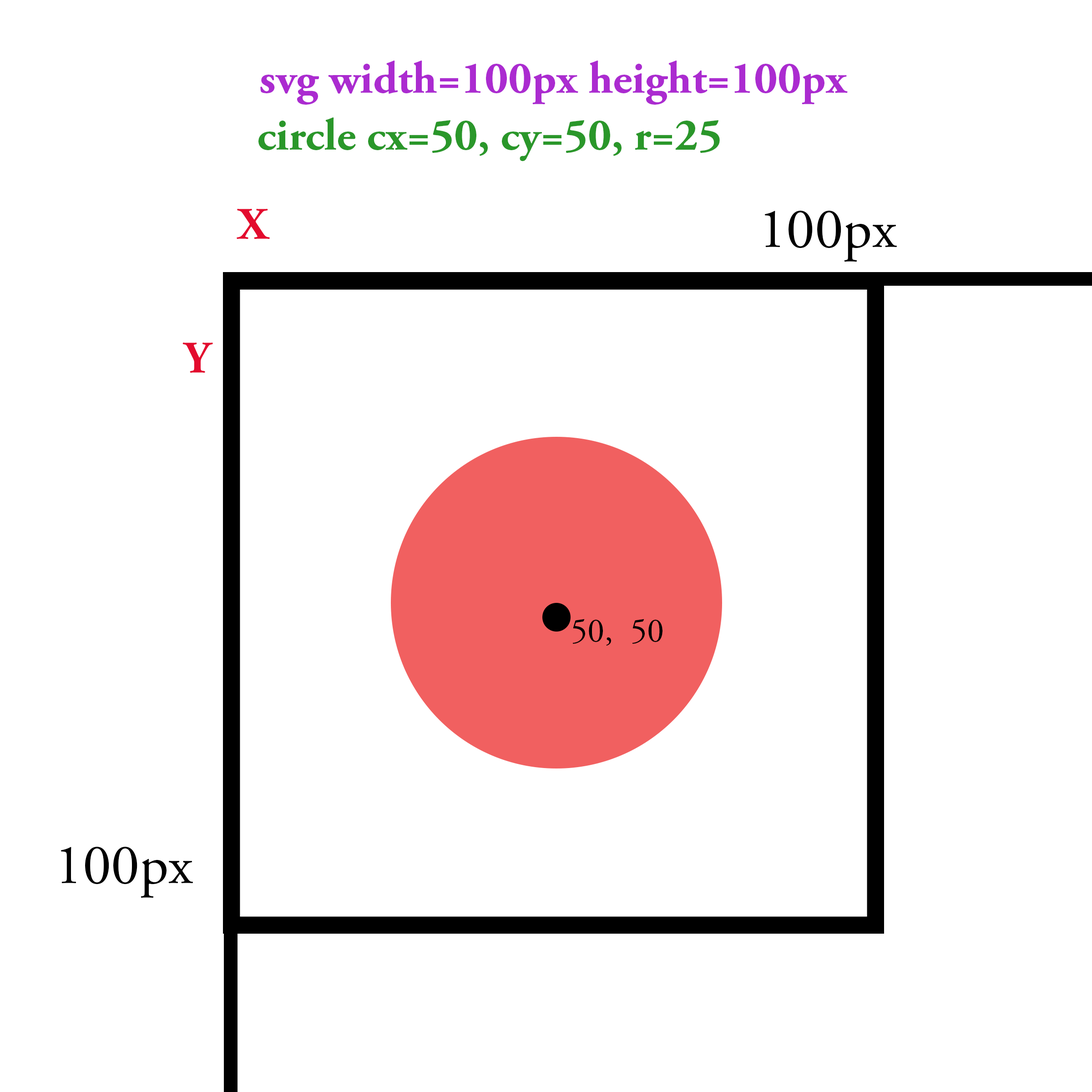
<style>
.page{position:relative;width:1092px;height:1092px;background:#ffffff}
.page>*{position:absolute;margin:0}
.t1{font:45.5px "AGaramondPro-Bold";color:#ab2bd0}
.t2{font:45.5px "AGaramondPro-Bold";color:#2a972a}
.t3{font:45.5px "AGaramondPro-Bold";color:#e30b2e}
.t4{font:56.9px "AGaramondPro-Regular";color:#000000}
.t5{font:34.1px "AGaramondPro-Regular";color:#000000}
</style>
<div class="page">
<p class="t1" style="left:260px;top:61px;width:588px;height:44px">svg width=100px height=100px</p>
<p class="t2" style="left:258px;top:117px;width:462px;height:44px">circle cx=50, cy=50, r=25</p>
<p class="t3" style="left:237px;top:209px;width:33px;height:30px">X</p>
<p class="t4" style="left:764px;top:211px;width:133px;height:51px">100px</p>
<p class="t3" style="left:182px;top:343px;width:31px;height:30px">Y</p>
<p class="t5" style="left:573px;top:619px;width:89px;height:27px">50,  50</p>
<p class="t4" style="left:61px;top:847px;width:132px;height:51px">100px</p>
</div>
